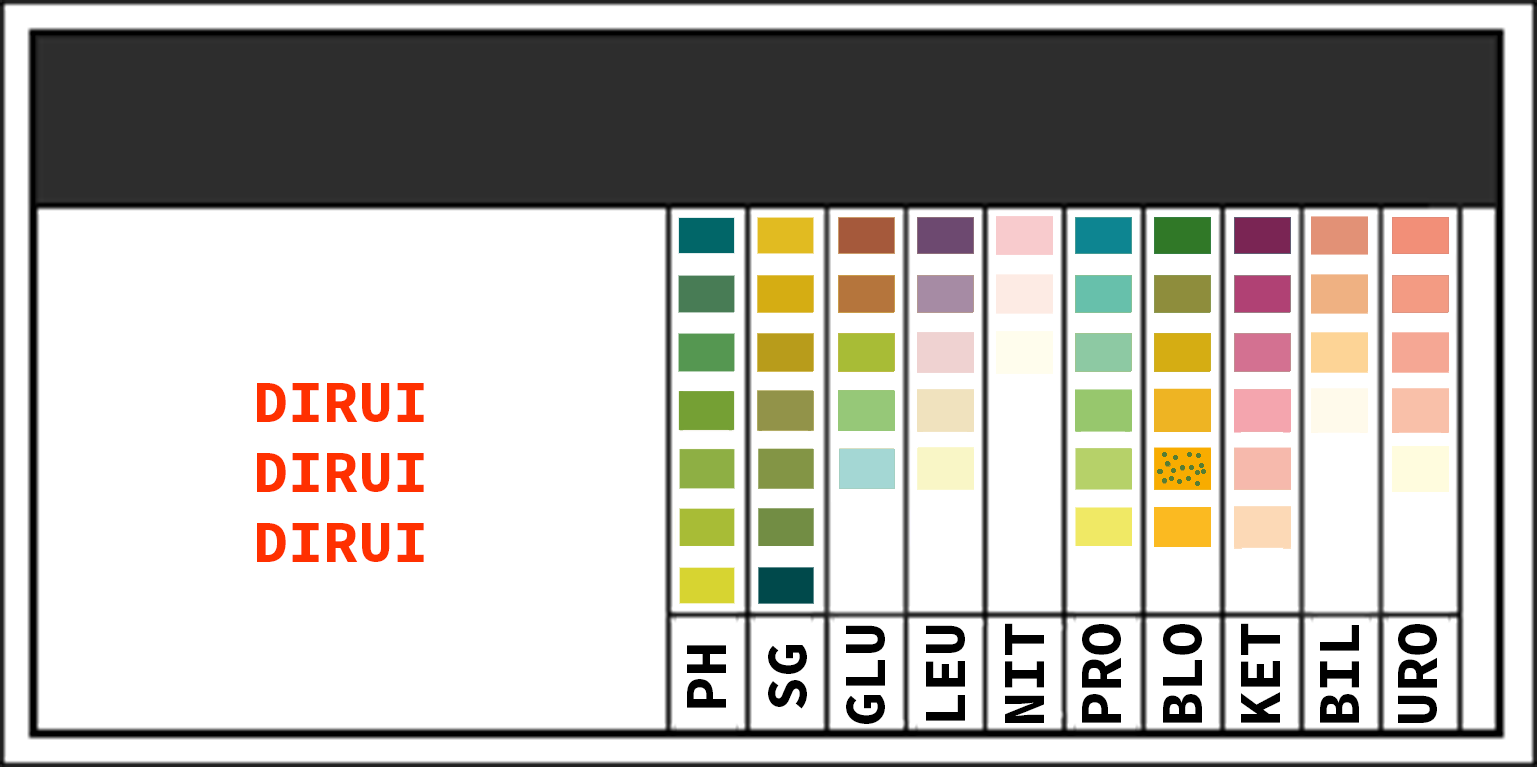
<style>
.page{position:relative;width:1537px;height:767px;background:#ffffff}
.page>*{position:absolute;margin:0}
.t1{font:58.3px "SourceCodeProForPowerline-Bold";color:#ff3000}
.t2{font:58.3px "SourceCodeProForPowerline-Bold";color:#000000}
</style>
<div class="page">
<p class="t1" style="left:257px;top:383px;width:167px;height:179px">DIRUI<br>DIRUI<br>DIRUI</p>
<p class="t2" style="left:846px;top:625px;width:39px;height:99px;rotate:-90deg">GLU</p>
<p class="t2" style="left:926px;top:625px;width:39px;height:96px;rotate:-90deg">LEU</p>
<p class="t2" style="left:1005px;top:623px;width:39px;height:100px;rotate:-90deg">NIT</p>
<p class="t2" style="left:1082px;top:624px;width:39px;height:99px;rotate:-90deg">PRO</p>
<p class="t2" style="left:1163px;top:624px;width:39px;height:99px;rotate:-90deg">BLO</p>
<p class="t2" style="left:1241px;top:623px;width:39px;height:100px;rotate:-90deg">KET</p>
<p class="t2" style="left:1320px;top:625px;width:39px;height:98px;rotate:-90deg">BIL</p>
<p class="t2" style="left:1398px;top:624px;width:39px;height:99px;rotate:-90deg">URO</p>
<p class="t2" style="left:687px;top:645px;width:39px;height:63px;rotate:-90deg">PH</p>
<p class="t2" style="left:768px;top:645px;width:39px;height:64px;rotate:-90deg">SG</p>
</div>
